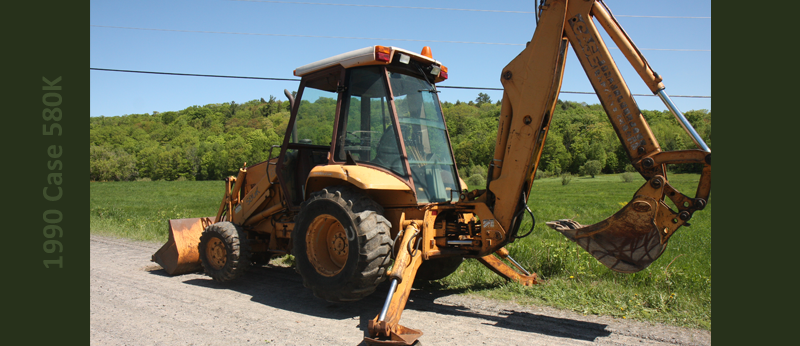
<style>
.page{position:relative;width:800px;height:346px;background:#27311b}
.page>*{position:absolute;margin:0}
.t1{font:30px "Calibri-Bold";color:#3f4e2e}
</style>
<div class="page">
<p class="t1" style="left:42px;top:76px;width:21px;height:192px;rotate:-90deg">1990 Case 580K</p>
</div>
